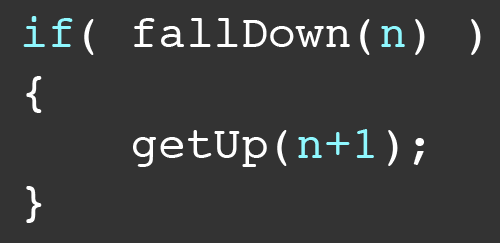
<style>
.page{position:relative;width:500px;height:243px;background:#333333}
.page>*{position:absolute;margin:0}
.t1{font:46px "Courier";color:#ffffff}
.t2{font:46px "Courier";color:#8ff8ff}
</style>
<div class="page">
<p class="t1" style="left:23px;top:16px;width:458px;height:207px"><span class="t2">if</span>( fallDown(<span class="t2">n</span>) )<br>{<br>    getUp(<span class="t2">n+1</span>);<br>}</p>
</div>
